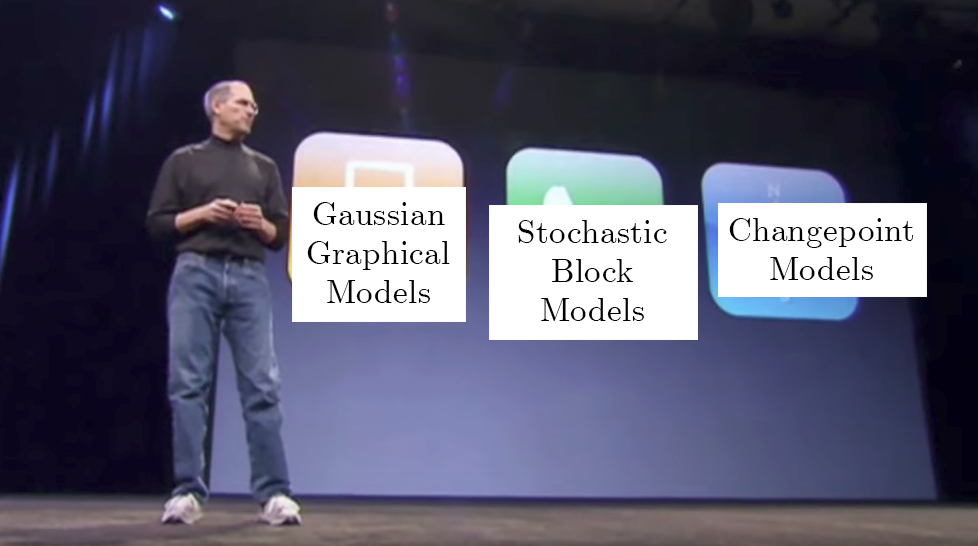
<style>
.page{position:relative;width:978px;height:546px}
.page>*{position:absolute;margin:0}
.t1{font:32.6px "CMUSerif-Roman";letter-spacing:0.02em;color:#010101}
</style>
<div class="page">
<p class="t1" style="left:307px;top:202px;width:143px;height:101px;text-align:center">Gaussian<br>Graphical<br>Models</p>
<p class="t1" style="left:518px;top:220px;width:149px;height:101px;text-align:center">Stochastic<br>Block<br>Models</p>
<p class="t1" style="left:729px;top:218px;width:185px;height:62px;text-align:center">Changepoint<br>Models</p>
</div>
